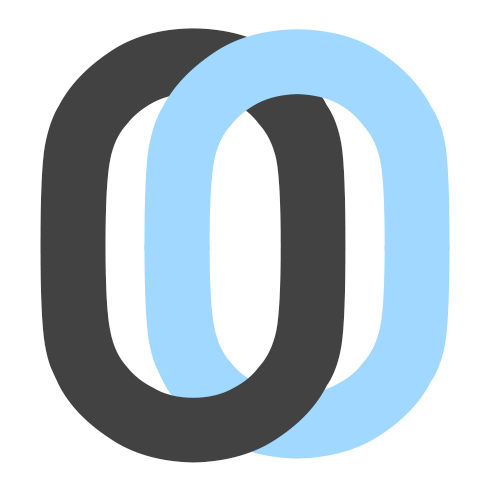
<style>
.page{position:relative;width:500px;height:500px;background:#ffffff}
.page>*{position:absolute;margin:0}
.t1{font:600px "DINAlternate-Bold";color:#424242}
</style>
<div class="page">
<p class="t1" style="left:40px;top:28px;width:306px;height:435px">O</p>
</div>
